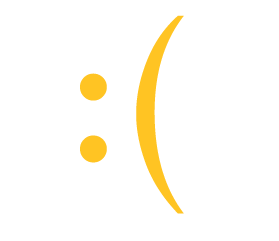
<style>
.page{position:relative;width:279px;height:241px;background:#ffffff}
.page>*{position:absolute;margin:0}
.t1{font:217px "BodoniMT";color:#ffc423}
</style>
<div class="page">
<p class="t1" style="left:80px;top:15px;width:104px;height:199px">:(</p>
</div>
